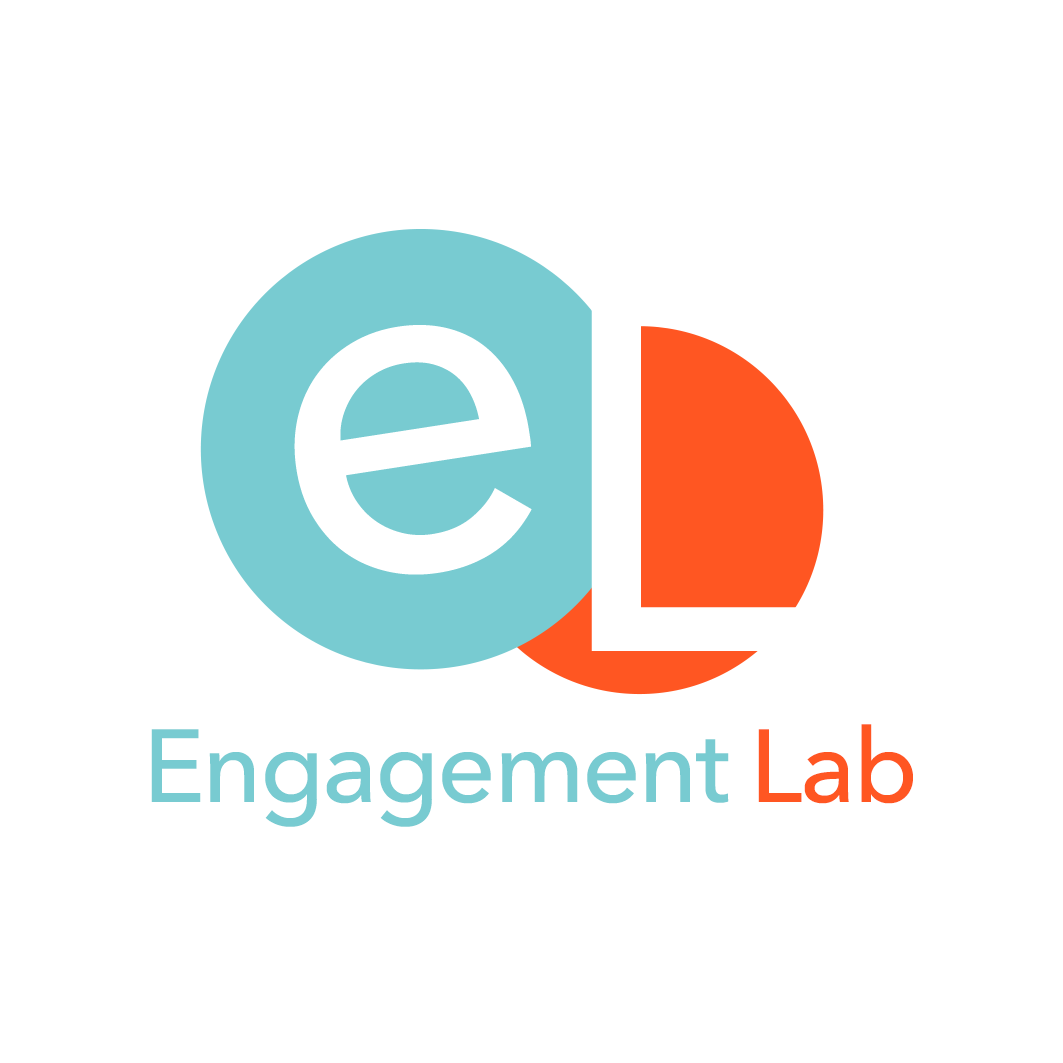
<style>
.page{position:relative;width:1063px;height:1063px;background:#ffffff}
.page>*{position:absolute;margin:0}
.t1{font:498.1px "AvenirNext-Medium";letter-spacing:-0.025em;color:#ffffff}
.t2{font:102.7px "AvenirNext-Medium";letter-spacing:-0.025em;color:#78cbd1}
.t3{font:102.7px "AvenirNext-Medium";letter-spacing:-0.025em;color:#ff5622}
</style>
<div class="page">
<p class="t1" style="left:591px;top:298px;width:208px;height:353px">L</p>
<p class="t1" style="left:294px;top:325px;width:238px;height:250px;rotate:-9deg">e</p>
<p class="t2" style="left:151px;top:724px;width:762px;height:103px">Engagement <span class="t3">Lab</span></p>
</div>
